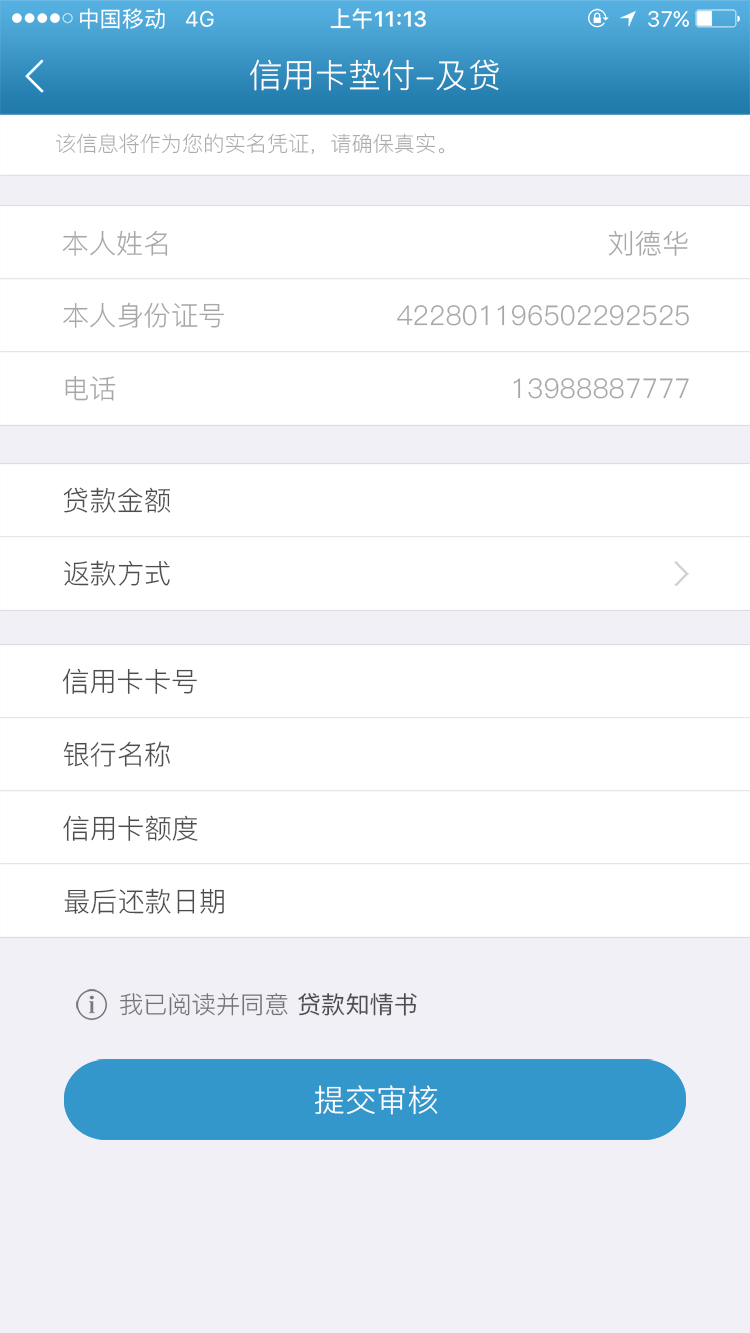
<style>
.page{position:relative;width:750px;height:1333px;background:#ffffff}
.page>*{position:absolute;margin:0}
.t1{font:33.3px "PingFang-SC-Regular";color:#ffffff}
.t2{font:21.1px "PingFang-SC-Light";color:#a5a5a5}
.t3{font:27.2px "PingFang-SC-Regular";color:#a7a7a7}
.t4{font:27.2px "PingFang-SC-Regular";color:#4d4d4d}
.t5{font:24.1px "PingFang-SC-Regular";color:#747272}
.t6{font:24.1px "PingFang-SC-Medium";color:#4d4d4d}
.t7{font:30.9px "PingFang-SC-Regular"}
.t8{font:31px "PingFang-SC-Regular";color:#ffffff}
</style>
<div class="page">
<p class="t1" style="left:250px;top:59px;width:249px;height:32px">信用卡垫付-及贷</p>
<p class="t2" style="left:55px;top:133px;width:390px;height:21px">该信息将作为您的实名凭证，请确保真实。</p>
<p class="t3" style="left:62px;top:230px;width:106px;height:26px">本人姓名</p>
<p class="t3" style="left:608px;top:230px;width:80px;height:26px">刘德华</p>
<p class="t3" style="left:63px;top:302px;width:161px;height:26px">本人身份证号</p>
<p class="t3" style="left:397px;top:305px;width:292px;height:21px">422801196502292525</p>
<p class="t3" style="left:65px;top:375px;width:51px;height:26px">电话</p>
<p class="t3" style="left:513px;top:378px;width:176px;height:21px">13988887777</p>
<p class="t4" style="left:63px;top:487px;width:108px;height:26px">贷款金额</p>
<p class="t4" style="left:64px;top:560px;width:106px;height:26px">返款方式</p>
<p class="t4" style="left:62px;top:668px;width:135px;height:26px">信用卡卡号</p>
<p class="t4" style="left:63px;top:741px;width:107px;height:26px">银行名称</p>
<p class="t4" style="left:63px;top:815px;width:135px;height:26px">信用卡额度</p>
<p class="t4" style="left:64px;top:888px;width:160px;height:26px">最后还款日期</p>
<p class="t5" style="left:120px;top:993px;width:297px;height:23px">我已阅读并同意 <span class="t6">贷款知情书</span></p>
<p class="t7" style="left:313px;top:1086px;width:124px;height:30px">提交审核</p>
<p class="t8" style="left:315px;top:1085px;width:123px;height:30px">提交审核</p>
</div>
